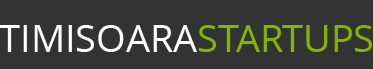
<style>
.page{position:relative;width:373px;height:69px;background:#333333}
.page>*{position:absolute;margin:0}
.t1{font:38px "OpenSans";color:#ffffff}
.t2{font:38px "OpenSans";color:#82b501}
</style>
<div class="page">
<p class="t1" style="left:0px;top:25px;width:372px;height:27px">TIMISOARA<span class="t2">STARTUPS</span></p>
</div>
